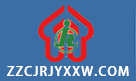
<style>
.page{position:relative;width:136px;height:81px;background:#3a6ea5}
.page>*{position:absolute;margin:0}
.t1{font:13px "AdobeHeitiStd-Regular";letter-spacing:0.08em;color:#fefefe}
</style>
<div class="page">
<p class="t1" style="left:7px;top:66px;width:122px;height:10px">ZZCJRJYXXW.COM</p>
</div>
